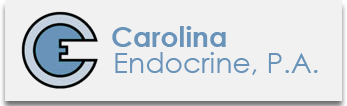
<style>
.page{position:relative;width:347px;height:106px;background:#f1f1f1}
.page>*{position:absolute;margin:0}
.t1{font:28.1px "CenturyGothic-Bold";color:#6993b9}
.t2{font:28.1px "CenturyGothic";color:#6993b9}
</style>
<div class="page">
<p class="t1" style="left:112px;top:26px;width:114px;height:21px">Carolina</p>
<p class="t2" style="left:115px;top:52px;width:203px;height:23px">Endocrine, P.A.</p>
</div>
